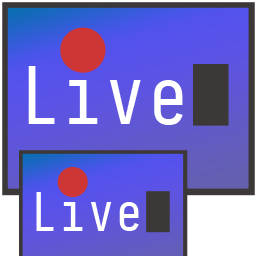
<style>
.page{position:relative;width:256px;height:256px}
.page>*{position:absolute;margin:0}
.t1{font:80px "InputMonoCompressed-Regular";color:#ffffff}
.t2{font:53.3px "InputMonoCompressed-Regular";color:#ffffff}
</style>
<div class="page">
<p class="t1" style="left:28px;top:64px;width:155px;height:61px">Live</p>
<p class="t2" style="left:36px;top:191px;width:103px;height:40px">Live</p>
</div>
